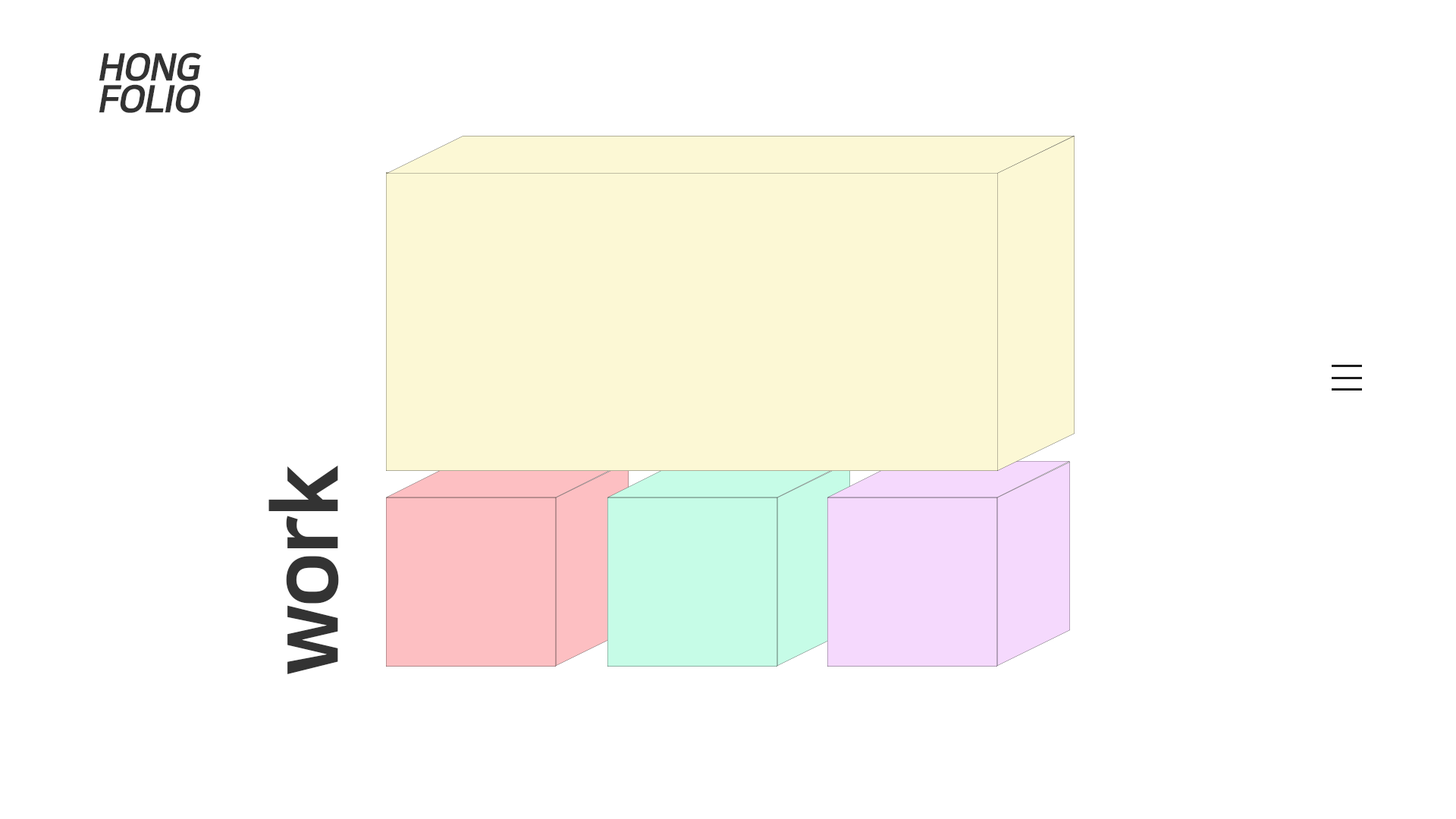
<style>
.page{position:relative;width:1456px;height:819px;background:#ffffff}
.page>*{position:absolute;margin:0}
.t1{font:37.9px/31.9px "NanumSquareEB";letter-spacing:-0.035em;color:#333333;font-style:italic}
.t2{font:91.2px "NanumSquareEB";letter-spacing:-0.035em;color:#333333}
</style>
<div class="page">
<p class="t1" style="left:99px;top:52px;width:103px;height:61px">HONG<br>FOLIO</p>
<p class="t2" style="left:268px;top:465px;width:71px;height:209px;rotate:-90deg">work</p>
</div>
